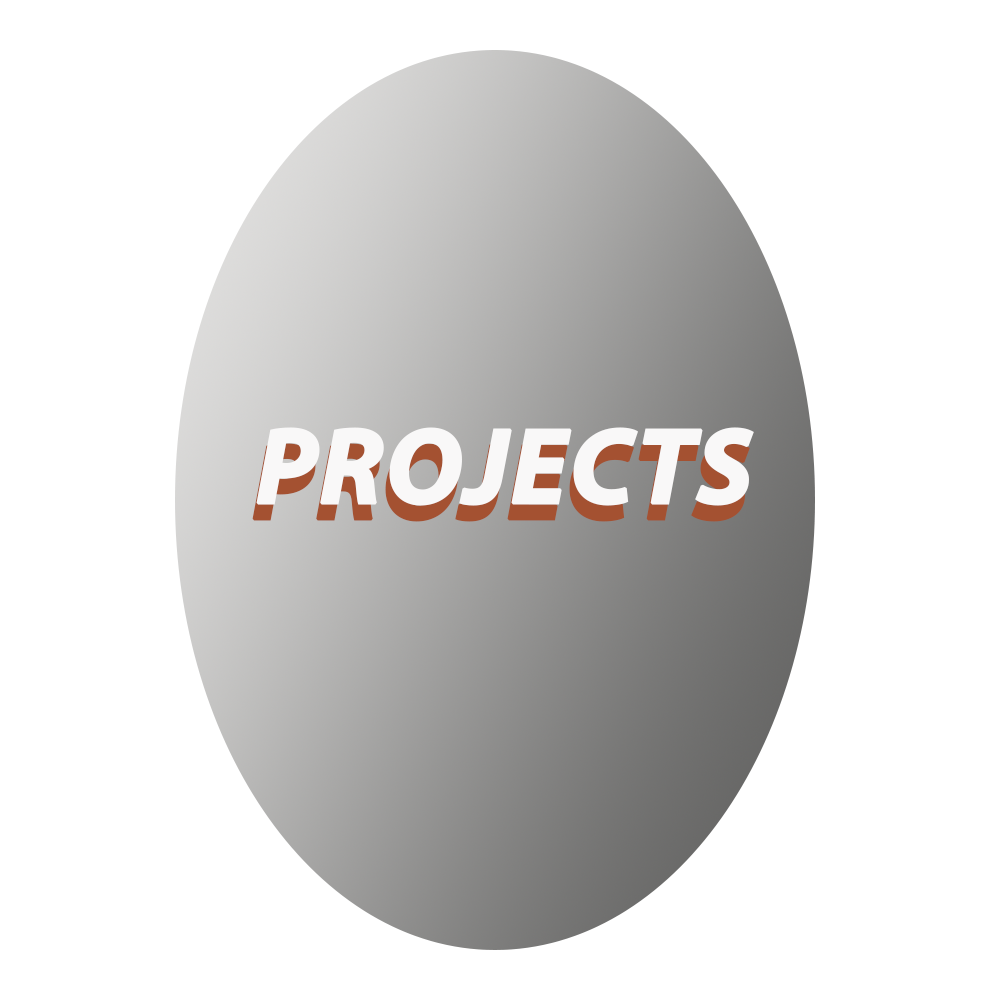
<style>
.page{position:relative;width:1000px;height:1000px;background:#ffffff}
.page>*{position:absolute;margin:0}
.t1{font:108.3px "MyriadPro-BoldIt";color:#f9f8f8;text-transform:uppercase;font-weight:bold}
.t2{font:125px "MyriadPro-Regular";color:#fdfdfc}
</style>
<div class="page">
<p class="t1" style="left:256px;top:427px;width:498px;height:79px"><span class="t2"><br><br><br></span>projects</p>
</div>
